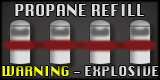
<style>
.page{position:relative;width:160px;height:80px}
.page>*{position:absolute;margin:0}
.t1{font:15.6px "Silom";color:#dedede}
.t2{font:13.6px "Silom";color:#dedede}
.t3{font:13.6px "Silom";color:#f6ff00}
</style>
<div class="page">
<p class="t1" style="left:15px;top:4px;width:129px;height:12px">PROPANE REFILL</p>
<p class="t2" style="left:2px;top:66px;width:156px;height:10px"><span class="t3">WARNING</span> - EXPLOSIVE</p>
</div>
